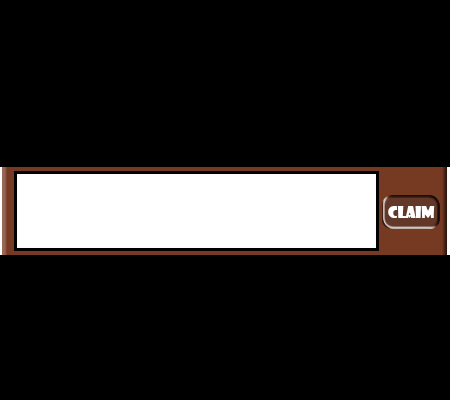
<style>
.page{position:relative;width:450px;height:400px;background:#000000}
.page>*{position:absolute;margin:0}
.t1{font:15.6px "ShowcardGothic-Reg";color:#ffffff}
</style>
<div class="page">
<p class="t1" style="left:388px;top:206px;width:47px;height:12px">CLAIM</p>
</div>
